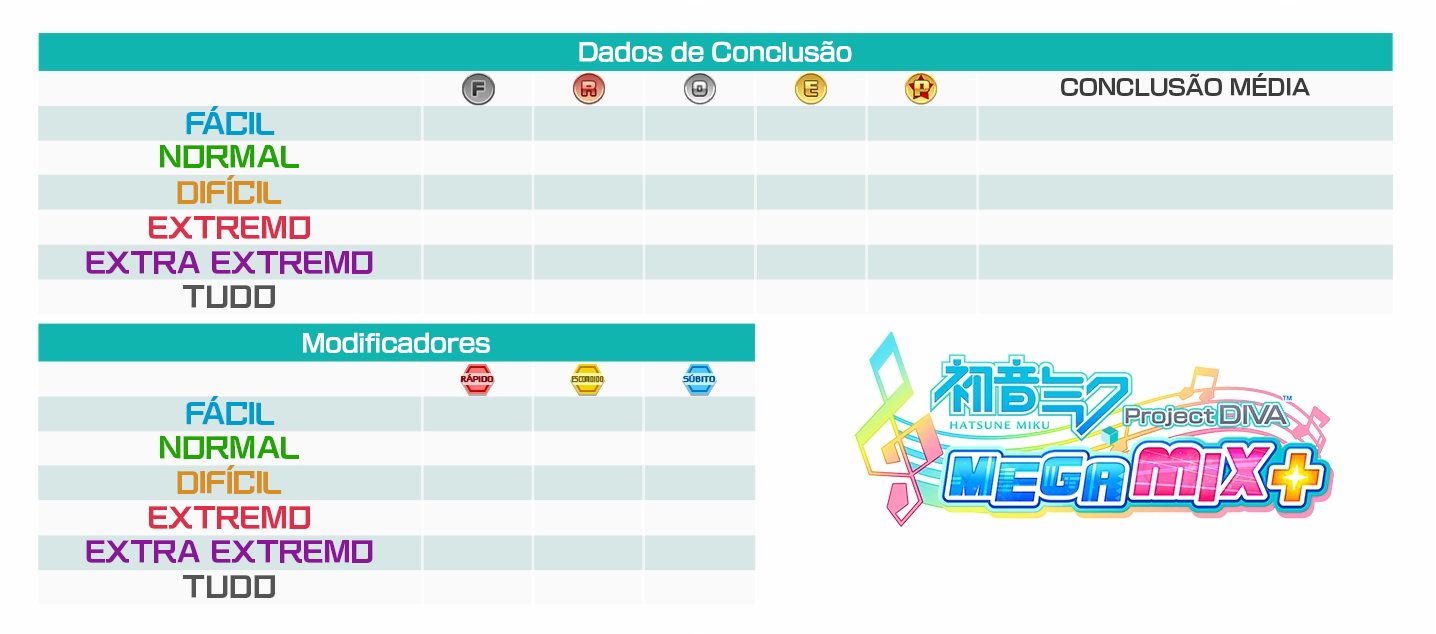
<style>
.page{position:relative;width:1436px;height:634px;background:#fffeff}
.page>*{position:absolute;margin:0}
.t1{font:24px "NewRodinPro-B";letter-spacing:-0.02em;color:#ffffff}
.t2{font:21.3px "NewRodinPro-B";letter-spacing:-0.005em;color:#3d3c3d}
.t3{font:25.3px "KafuTechnoStd-U";color:#009ccf}
.t4{font:25.3px "KafuTechnoStd-U";letter-spacing:0.014em;color:#21a500}
.t5{font:25.3px "KafuTechnoStd-U";letter-spacing:-0.011em;color:#d78f24}
.t6{font:25.3px "KafuTechnoStd-U";letter-spacing:0.016em;color:#dd3048}
.t7{font:25.3px "KafuTechnoStd-U";letter-spacing:0.013em;color:#8b1598}
.t8{font:25.3px "KafuTechnoStd-U";letter-spacing:0.024em;color:#555455}
.t9{font:24px "NewRodinPro-B";letter-spacing:-0.017em;color:#ffffff}
</style>
<div class="page">
<p class="t1" style="left:579px;top:41px;width:273px;height:21px">Dados de Conclusão</p>
<p class="t2" style="left:1061px;top:73px;width:249px;height:24px">CONCLUSÃO MÉDIA</p>
<p class="t3" style="left:186px;top:106px;width:89px;height:29px">FÁCIL</p>
<p class="t4" style="left:160px;top:145px;width:139px;height:23px">NORMAL</p>
<p class="t5" style="left:177px;top:175px;width:105px;height:29px">DIFÍCIL</p>
<p class="t6" style="left:149px;top:216px;width:161px;height:23px">EXTREMO</p>
<p class="t7" style="left:86px;top:251px;width:287px;height:23px">EXTRA EXTREMO</p>
<p class="t8" style="left:183px;top:285px;width:92px;height:23px">TUDO</p>
<p class="t9" style="left:303px;top:332px;width:187px;height:21px">Modificadores</p>
<p class="t3" style="left:186px;top:396px;width:89px;height:29px">FÁCIL</p>
<p class="t4" style="left:160px;top:436px;width:139px;height:23px">NORMAL</p>
<p class="t5" style="left:177px;top:465px;width:105px;height:29px">DIFÍCIL</p>
<p class="t6" style="left:149px;top:506px;width:161px;height:23px">EXTREMO</p>
<p class="t7" style="left:86px;top:540px;width:287px;height:23px">EXTRA EXTREMO</p>
<p class="t8" style="left:183px;top:575px;width:92px;height:23px">TUDO</p>
</div>
